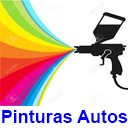
<style>
.page{position:relative;width:128px;height:128px;background:#ffffff}
.page>*{position:absolute;margin:0}
.t1{font:18px "Arial-BoldMT";color:#0000ff}
</style>
<div class="page">
<p class="t1" style="left:2px;top:110px;width:126px;height:13px">Pinturas Autos</p>
</div>
